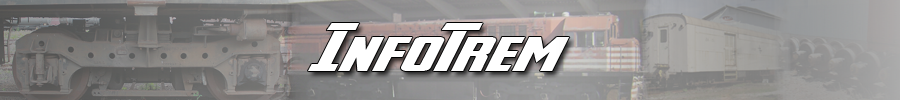
<style>
.page{position:relative;width:900px;height:100px}
.page>*{position:absolute;margin:0}
.t1{font:47.3px "AvengeanceHeroicAvengerNormal";color:#ffffff;scale:1.7 1}
</style>
<div class="page">
<p class="t1" style="left:308px;top:23px;width:262px;height:48px">InfoTrem</p>
</div>
